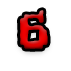
<style>
.page{position:relative;width:71px;height:71px;background:#ffffff}
.page>*{position:absolute;margin:0}
.t1{font:55px "Tipi-Organic"}
</style>
<div class="page">
<p class="t1" style="left:20px;top:10px;width:28px;height:39px">6</p>
</div>
